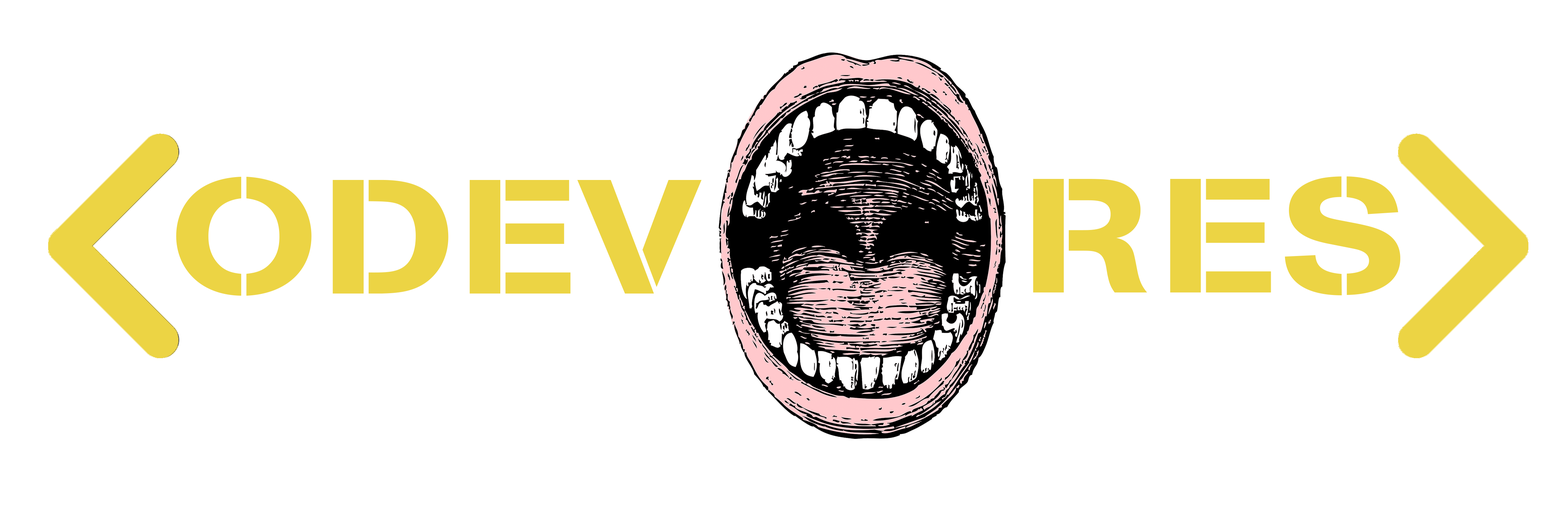
<style>
.page{position:relative;width:1568px;height:506px;background:#ffffff}
.page>*{position:absolute;margin:0}
.t1{font:160.6px "AGBook-Stencil";color:#ecd444;scale:1.2 1}
</style>
<div class="page">
<p class="t1" style="left:176px;top:177px;width:526px;height:118px">ODEV</p>
<p class="t1" style="left:1033px;top:176px;width:367px;height:119px">RES</p>
</div>
